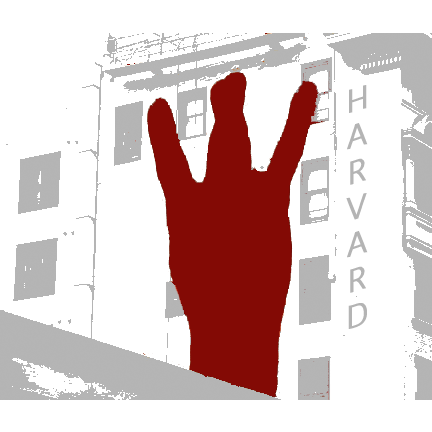
<style>
.page{position:relative;width:432px;height:432px;background:#ffffff}
.page>*{position:absolute;margin:0}
.t1{font:30px "Geneva";color:#b4b4b4}
</style>
<div class="page">
<p class="t1" style="left:346px;top:85px;width:22px;height:244px;text-align:center">H<br>A<br>R<br>V<br>A<br>R<br>D</p>
</div>
